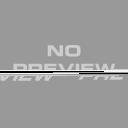
<style>
.page{position:relative;width:128px;height:128px;background:#999999}
.page>*{position:absolute;margin:0}
.t1{font:15.4px "Eurostile-BoldExtendedTwo";color:#cccccc}
</style>
<div class="page">
<p class="t1" style="left:10px;top:45px;width:106px;height:30px;text-align:center">NO<br>PREVIEW</p>
</div>
